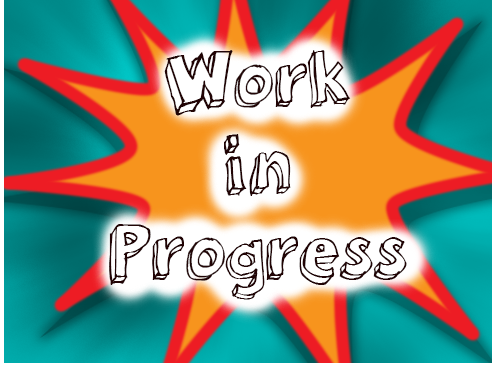
<style>
.page{position:relative;width:500px;height:380px}
.page>*{position:absolute;margin:0}
.t1{font:72px "3dumb";color:#210405}
</style>
<div class="page">
<p class="t1" style="left:109px;top:50px;width:298px;height:250px;text-align:center">Work<br>in<br>Progress</p>
</div>
